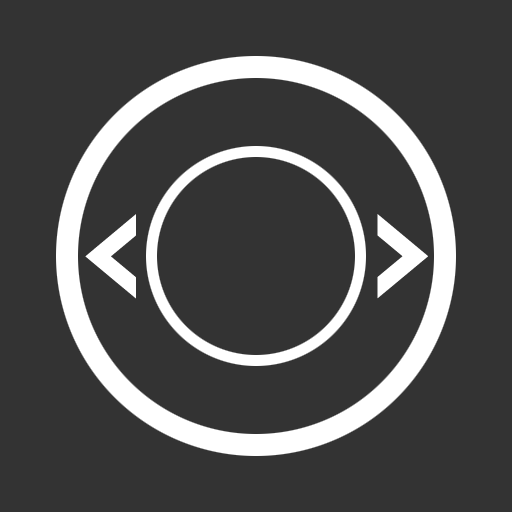
<style>
.page{position:relative;width:512px;height:512px;background:#333333}
.page>*{position:absolute;margin:0}
.t1{font:120px "Furore";color:#ffffff;scale:0.75 1}
.t2{font:120.2px "Furore";color:#ffffff;scale:0.75 1}
</style>
<div class="page">
<p class="t1" style="left:85px;top:214px;width:51px;height:85px">&lt;</p>
<p class="t2" style="left:377px;top:214px;width:51px;height:85px;rotate:180deg">&lt;</p>
</div>
